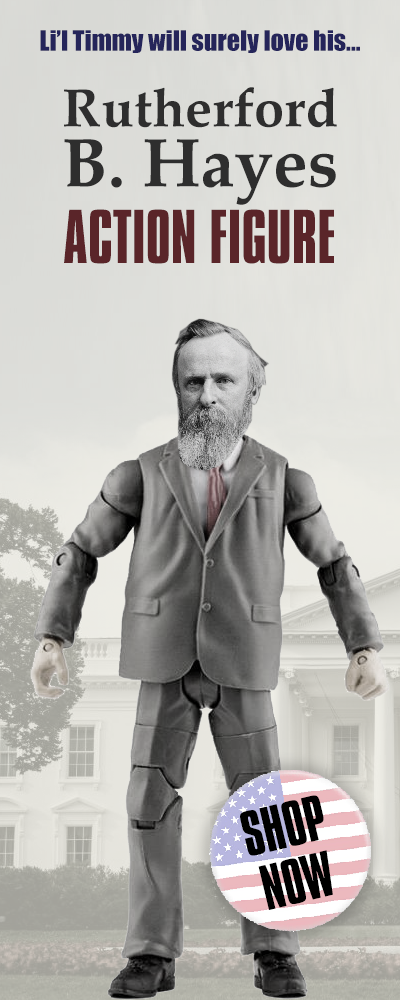
<style>
.page{position:relative;width:400px;height:1000px}
.page>*{position:absolute;margin:0}
.t1{font:26px "Impact";color:#25255a}
.t2{font:54px/54px "Palatino-Bold";color:#2e2e2e}
.t3{font:69px/60px "Palatino-Bold";color:#2e2e2e}
.t4{font:65.5px "Compacta";color:#5a2529}
.t5{font:55px/56.4px "Compacta";color:#000000}
</style>
<div class="page">
<p class="t1" style="left:40px;top:30px;width:320px;height:23px">Li’l Timmy will surely love his...</p>
<p class="t2" style="left:64px;top:87px;width:273px;height:118px;text-align:center">Rutherford<br><span class="t3">B. Hayes</span></p>
<p class="t4" style="left:64px;top:209px;width:270px;height:55px">ACTION FIGURE</p>
<p class="t5" style="left:240px;top:795px;width:93px;height:115px;text-align:center;rotate:-13deg">SHOP<br>NOW</p>
</div>
